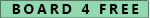
<style>
.page{position:relative;width:150px;height:18px;background:#92d9af}
.page>*{position:absolute;margin:0}
.t1{font:14px "MicrosoftNewTaiLue-Bold";letter-spacing:0.2em;color:#000000}
</style>
<div class="page">
<p class="t1" style="left:12px;top:4px;width:127px;height:10px">BOARD 4 FREE</p>
</div>
